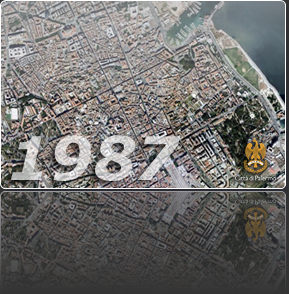
<style>
.page{position:relative;width:289px;height:294px}
.page>*{position:absolute;margin:0}
.t1{font:60px "Verdana-BoldItalic"}
</style>
<div class="page">
<p class="t1" style="left:11px;top:135px;width:170px;height:46px">1987</p>
</div>
